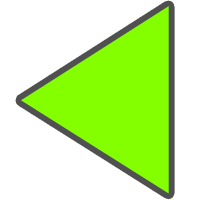
<style>
.page{position:relative;width:200px;height:200px;background:#ffffff}
.page>*{position:absolute;margin:0}
.t1{font:240px "Gulim";color:#84ff00}
</style>
<div class="page">
<p class="t1" style="left:21px;top:6px;width:148px;height:188px">◀</p>
</div>
